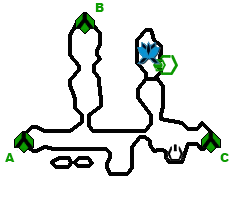
<style>
.page{position:relative;width:236px;height:200px;background:#ffffff}
.page>*{position:absolute;margin:0}
.t1{font:12px "Arial-Black";color:#0d9e01}
</style>
<div class="page">
<p class="t1" style="left:95px;top:3px;width:9px;height:9px">B</p>
<p class="t1" style="left:5px;top:153px;width:10px;height:9px">A</p>
<p class="t1" style="left:220px;top:153px;width:9px;height:9px">C</p>
</div>
